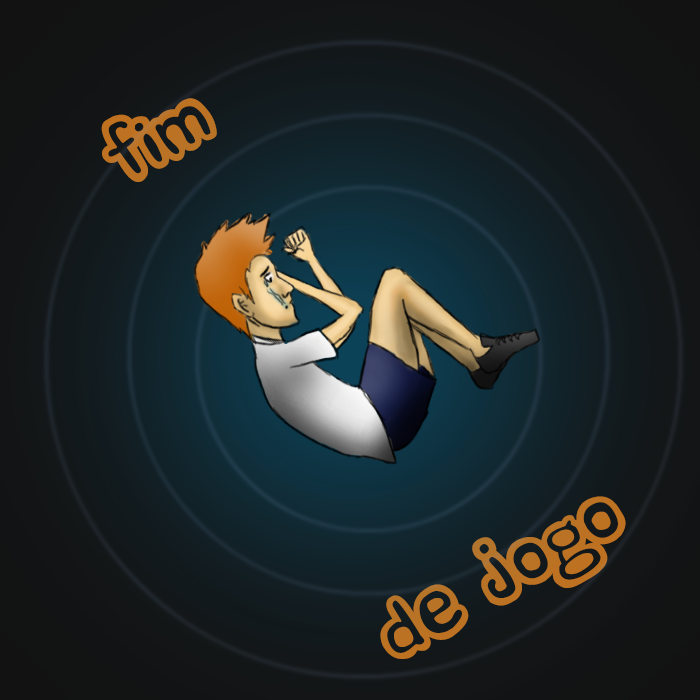
<style>
.page{position:relative;width:700px;height:700px}
.page>*{position:absolute;margin:0}
.t1{font:120px "comicandy";color:#c3701a}
</style>
<div class="page">
<p class="t1" style="left:101px;top:98px;width:116px;height:84px;rotate:-30deg">fim</p>
<p class="t1" style="left:380px;top:496px;width:246px;height:163px;rotate:-30deg">de jogo</p>
</div>
